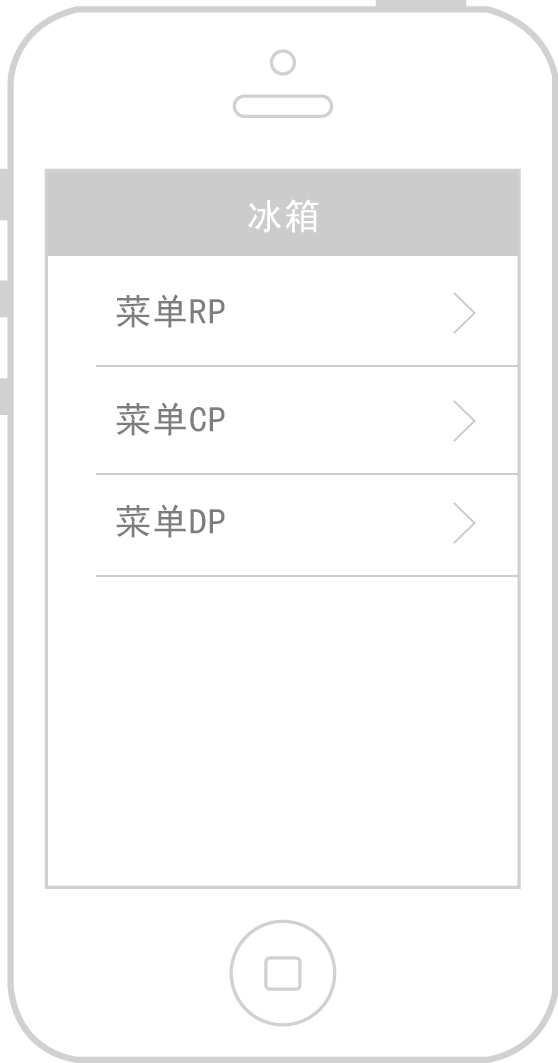
<style>
.page{position:relative;width:558px;height:1063px;background:#ffffff}
.page>*{position:absolute;margin:0}
.t1{font:36px "SimHei";letter-spacing:0.025em;color:#ffffff}
.t2{font:36px "SimHei";letter-spacing:0.025em;color:#7d7d7d}
</style>
<div class="page">
<p class="t1" style="left:248px;top:199px;width:71px;height:34px">冰箱</p>
<p class="t2" style="left:116px;top:294px;width:109px;height:34px">菜单RP</p>
<p class="t2" style="left:116px;top:402px;width:109px;height:34px">菜单CP</p>
<p class="t2" style="left:116px;top:504px;width:109px;height:34px">菜单DP</p>
</div>
